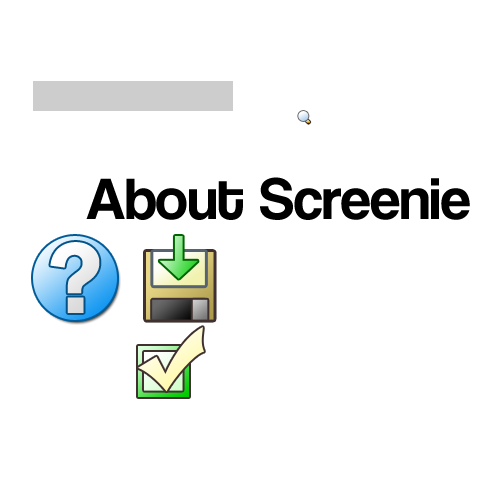
<style>
.page{position:relative;width:500px;height:500px;background:#ffffff}
.page>*{position:absolute;margin:0}
.t1{font:55.9px "Coolvetica";color:#000000}
.t2{font:104.3px "FranklinGothic-Demi";letter-spacing:-0.025em;color:#ededed}
</style>
<div class="page">
<p class="t1" style="left:86px;top:177px;width:384px;height:43px">About Screenie</p>
<p class="t2" style="left:50px;top:242px;width:50px;height:71px">?</p>
</div>
